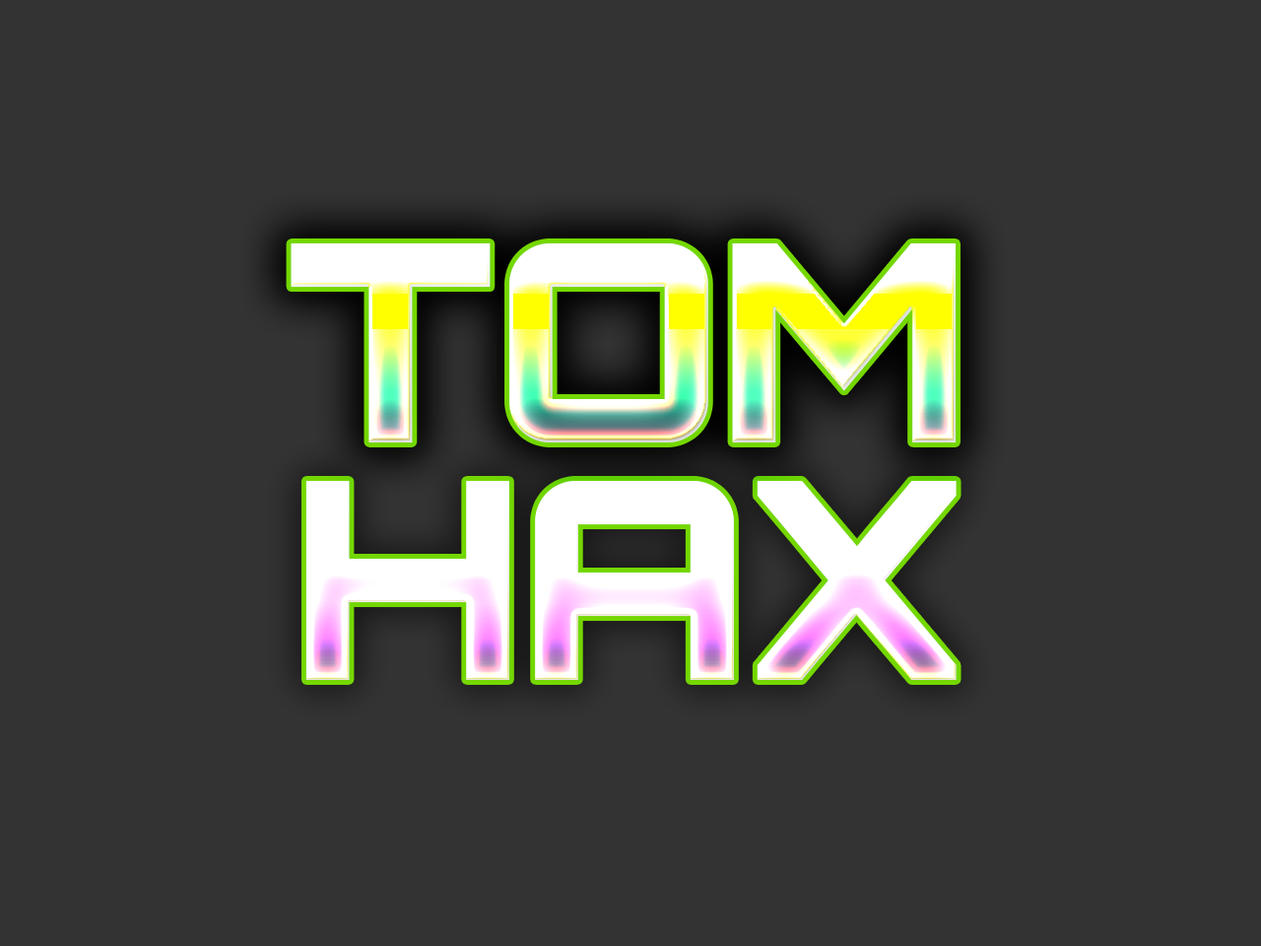
<style>
.page{position:relative;width:1261px;height:946px;background:#333333}
.page>*{position:absolute;margin:0}
.t1{font:276.2px "Orbitron-Black"}
.t2{font:276.2px "Orbitron-Black";color:#ffffff}
</style>
<div class="page">
<p class="t1" style="left:291px;top:243px;width:665px;height:199px">TOM</p>
<p class="t2" style="left:305px;top:481px;width:652px;height:199px">HAX</p>
</div>
